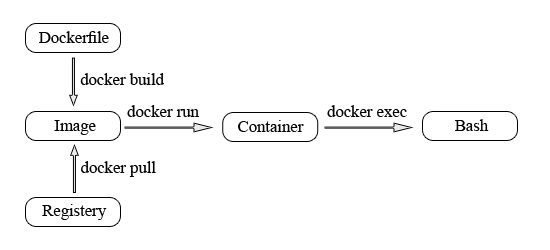
<style>
.page{position:relative;width:550px;height:250px;background:#ffffff}
.page>*{position:absolute;margin:0}
.t1{font:16.7px "TimesNewRomanPSMT";color:#000000}
</style>
<div class="page">
<p class="t1" style="left:39px;top:31px;width:70px;height:12px">Dockerfile</p>
<p class="t1" style="left:80px;top:73px;width:84px;height:12px">docker build</p>
<p class="t1" style="left:127px;top:105px;width:72px;height:12px">docker run</p>
<p class="t1" style="left:327px;top:105px;width:80px;height:12px">docker exec</p>
<p class="t1" style="left:54px;top:120px;width:42px;height:15px">Image</p>
<p class="t1" style="left:238px;top:120px;width:66px;height:12px">Container</p>
<p class="t1" style="left:455px;top:119px;width:34px;height:12px">Bash</p>
<p class="t1" style="left:81px;top:161px;width:75px;height:16px">docker pull</p>
<p class="t1" style="left:42px;top:204px;width:65px;height:16px">Registery</p>
</div>
